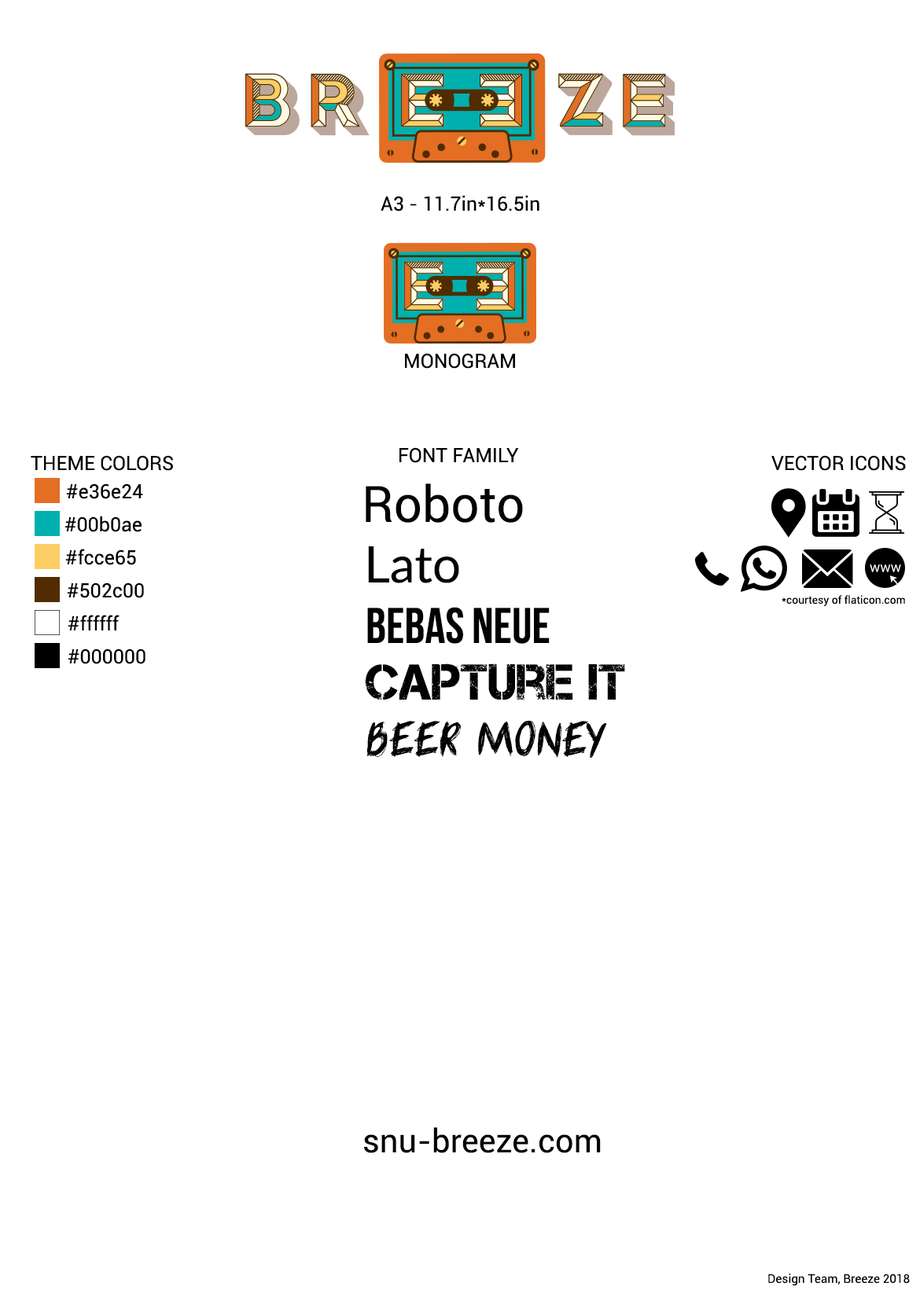
<style>
.page{position:relative;width:920px;height:1297px;background:#ffffff}
.page>*{position:absolute;margin:0}
.t1{font:19.7px "Roboto-Regular";color:#020202}
.t2{font:50.2px "Roboto-Regular";color:#020202}
.t3{font:50.2px "Lato-Regular";color:#020202}
.t4{font:10.9px "Roboto-Regular";color:#020202}
.t5{font:50.2px "BebasNeue";color:#020202}
.t6{font:50.2px "Captureit";color:#020202}
.t7{font:50.2px "beermoney";color:#020202}
.t8{font:32.8px "Roboto-Regular";color:#020202}
.t9{font:12px "Roboto-Regular";color:#020202}
</style>
<div class="page">
<p class="t1" style="left:380px;top:195px;width:159px;height:16px">A3 - 11.7in*16.5in</p>
<p class="t1" style="left:405px;top:353px;width:110px;height:16px">MONOGRAM</p>
<p class="t1" style="left:399px;top:447px;width:120px;height:16px">FONT FAMILY</p>
<p class="t1" style="left:31px;top:455px;width:142px;height:16px">THEME COLORS</p>
<p class="t1" style="left:771px;top:455px;width:134px;height:16px">VECTOR ICONS</p>
<p class="t1" style="left:66px;top:483px;width:77px;height:16px">#e36e24</p>
<p class="t2" style="left:365px;top:483px;width:158px;height:40px">Roboto</p>
<p class="t1" style="left:64px;top:516px;width:77px;height:16px">#00b0ae</p>
<p class="t1" style="left:65px;top:549px;width:71px;height:16px">#fcce65</p>
<p class="t3" style="left:368px;top:546px;width:91px;height:37px">Lato</p>
<p class="t1" style="left:67px;top:582px;width:77px;height:16px">#502c00</p>
<p class="t4" style="left:781px;top:595px;width:124px;height:11px">*courtesy of flaticon.com</p>
<p class="t1" style="left:68px;top:615px;width:51px;height:15px">#ffffff</p>
<p class="t5" style="left:367px;top:607px;width:182px;height:37px">Bebas NEUE</p>
<p class="t1" style="left:68px;top:648px;width:77px;height:16px">#000000</p>
<p class="t6" style="left:365px;top:663px;width:260px;height:37px">Capture It</p>
<p class="t7" style="left:366px;top:720px;width:241px;height:38px">BEER MONEY</p>
<p class="t8" style="left:364px;top:1127px;width:236px;height:26px">snu-breeze.com</p>
<p class="t9" style="left:768px;top:1273px;width:141px;height:13px">Design Team, Breeze 2018</p>
</div>
